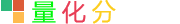
<style>
.page{position:relative;width:180px;height:24px;background:#ffffff}
.page>*{position:absolute;margin:0}
.t1{font:24px "MicrosoftYaHeiLight";letter-spacing:-0.05em;color:#00f70b;font-weight:bold}
.t2{font:24px "MicrosoftYaHei-Bold";letter-spacing:-0.05em;color:#00f70b;font-weight:bold}
.t3{font:24px "MicrosoftYaHeiLight";letter-spacing:-0.05em;color:#e83e56;font-weight:bold}
.t4{font:24px "MicrosoftYaHeiLight";letter-spacing:-0.05em;color:#fccd1f;font-weight:bold}
.t5{font:24px "MicrosoftYaHeiLight";letter-spacing:-0.05em;color:#ffffff;font-weight:bold}
</style>
<div class="page">
<p class="t1" style="left:32px;top:0px;width:114px;height:24px"><span class="t2"> </span>量 <span class="t3">化 </span><span class="t4">分</span><span class="t5"> 析</span></p>
</div>
